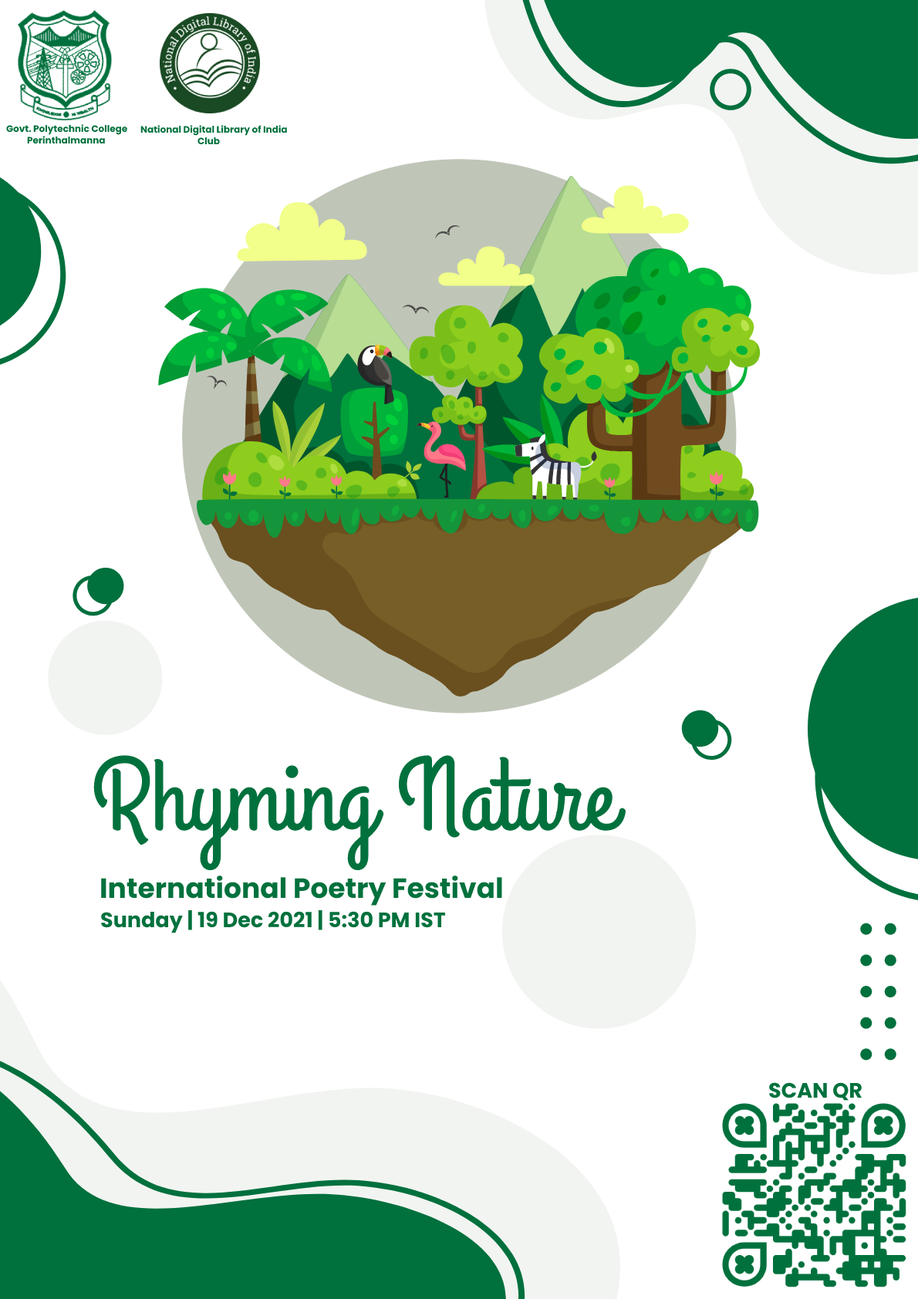
<style>
.page{position:relative;width:918px;height:1299px;background:#ffffff}
.page>*{position:absolute;margin:0}
.t1{font:9.3px "Poppins-Bold";color:#00713d}
.t2{font:103.2px "GrandHotel-Regular";color:#00713d}
.t3{font:27.8px "Poppins-Bold";color:#00713d}
.t4{font:20.8px "Poppins-Bold";color:#00713d}
</style>
<div class="page">
<p class="t1" style="left:6px;top:124px;width:121px;height:11px">Govt. Polytechnic College</p>
<p class="t1" style="left:140px;top:125px;width:147px;height:11px">National Digital Library of India</p>
<p class="t1" style="left:27px;top:136px;width:78px;height:8px">Perinthalmanna</p>
<p class="t1" style="left:197px;top:137px;width:23px;height:8px">Club</p>
<p class="t2" style="left:93px;top:755px;width:533px;height:116px">Rhyming Nature</p>
<p class="t3" style="left:101px;top:876px;width:401px;height:30px">International Poetry Festival</p>
<p class="t4" style="left:101px;top:910px;width:344px;height:23px">Sunday | 19 Dec 2021 | 5:30 PM IST</p>
<p class="t4" style="left:769px;top:1082px;width:93px;height:19px">SCAN QR</p>
</div>
